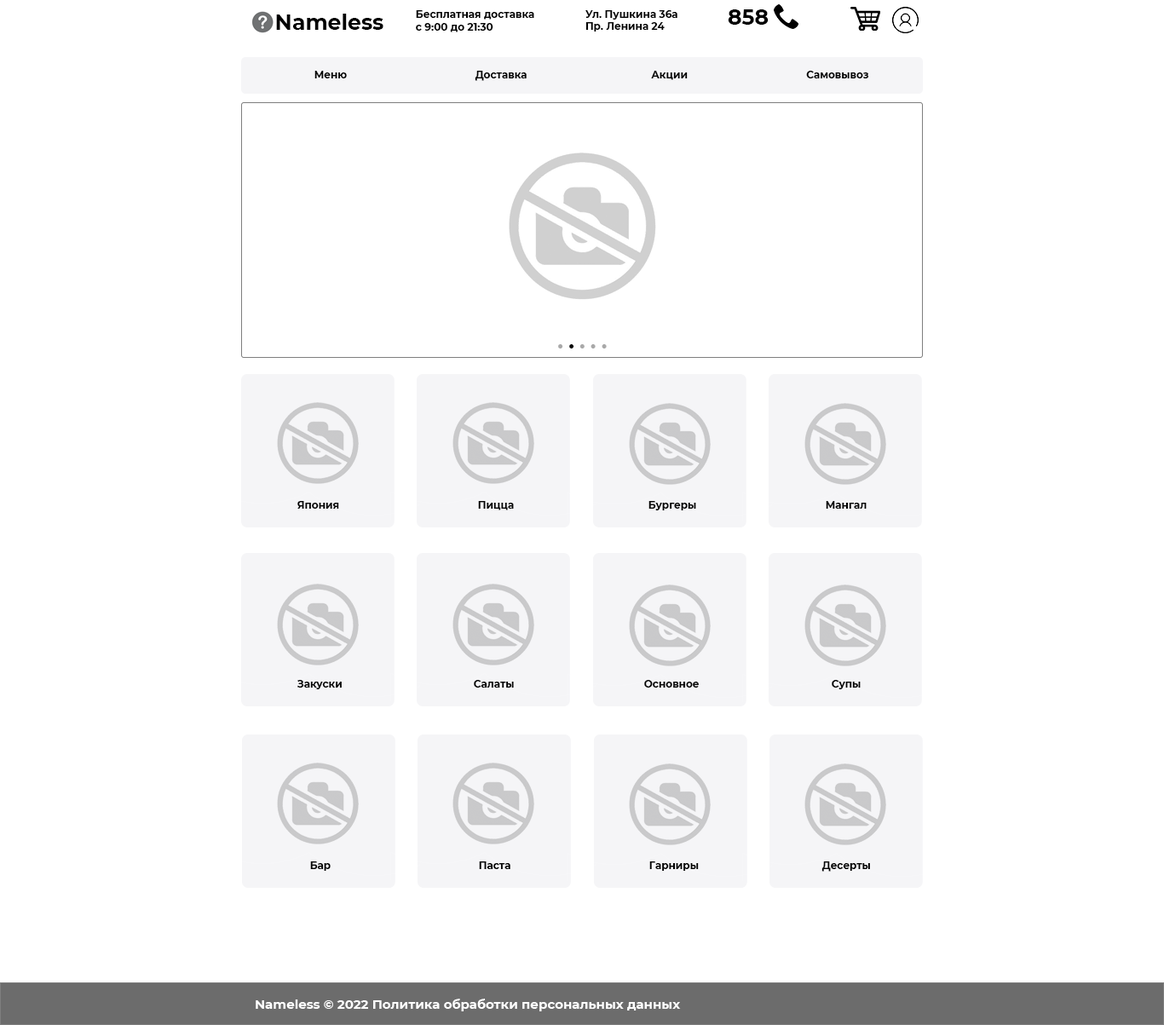
<style>
.page{position:relative;width:1164px;height:1025px;background:#ffffff}
.page>*{position:absolute;margin:0}
.t1{font:21.3px "Montserrat-Bold";color:#000000}
.t2{font:10.2px "Montserrat-Bold";color:#000000}
.t3{font:17px "Montserrat-Bold";color:#a9a9a9}
.t4{font:17px "Montserrat-Bold";color:#010101}
.t5{font:10.2px "Montserrat-Bold";color:#010101}
.t6{font:12.8px "Montserrat-Bold";color:#ffffff}
</style>
<div class="page">
<p class="t1" style="left:276px;top:14px;width:107px;height:16px">Nameless</p>
<p class="t2" style="left:416px;top:10px;width:118px;height:22px">Бесплатная доставка<br>с 9:00 до 21:30</p>
<p class="t2" style="left:585px;top:10px;width:92px;height:22px">Ул. Пушкина 36а<br>Пр. Ленина 24</p>
<p class="t1" style="left:727px;top:9px;width:41px;height:16px">858</p>
<p class="t2" style="left:314px;top:71px;width:33px;height:7px">Меню</p>
<p class="t2" style="left:474px;top:71px;width:52px;height:10px">Доставка</p>
<p class="t2" style="left:651px;top:71px;width:36px;height:9px">Акции</p>
<p class="t2" style="left:806px;top:71px;width:63px;height:7px">Самовывоз</p>
<p class="t3" style="left:558px;top:344px;width:49px;height:4px">• <span class="t4">•</span> • • •</p>
<p class="t5" style="left:297px;top:501px;width:42px;height:8px">Япония</p>
<p class="t5" style="left:478px;top:501px;width:36px;height:9px">Пицца</p>
<p class="t5" style="left:648px;top:501px;width:48px;height:9px">Бургеры</p>
<p class="t5" style="left:825px;top:501px;width:41px;height:8px">Мангал</p>
<p class="t5" style="left:297px;top:680px;width:45px;height:9px">Закуски</p>
<p class="t5" style="left:474px;top:680px;width:40px;height:7px">Салаты</p>
<p class="t5" style="left:644px;top:680px;width:55px;height:7px">Основное</p>
<p class="t5" style="left:831px;top:680px;width:29px;height:9px">Супы</p>
<p class="t5" style="left:310px;top:861px;width:21px;height:10px">Бар</p>
<p class="t5" style="left:479px;top:861px;width:31px;height:8px">Паста</p>
<p class="t5" style="left:649px;top:861px;width:50px;height:10px">Гарниры</p>
<p class="t5" style="left:821px;top:861px;width:49px;height:10px">Десерты</p>
<p class="t6" style="left:256px;top:998px;width:425px;height:13px">Nameless © 2022 Политика обработки персональных данных</p>
</div>
